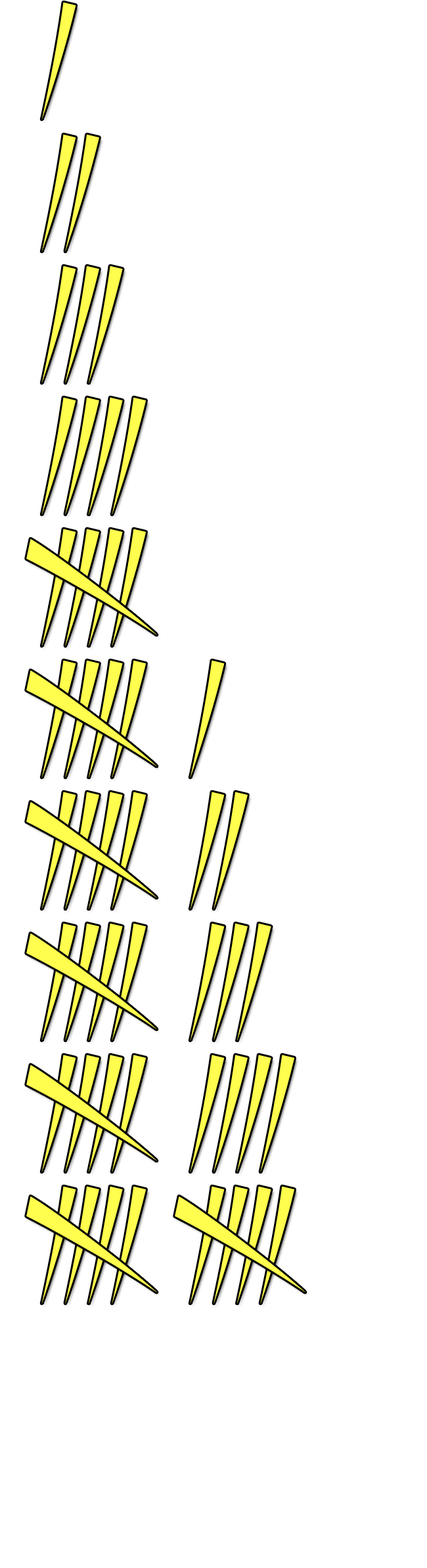
<style>
.page{position:relative;width:427px;height:1568px;background:#ffffff}
.page>*{position:absolute;margin:0}
.t1{font:131.5px "StillTime-Regular";letter-spacing:0.03em;color:#fffd4d}
</style>
<div class="page">
<p class="t1" style="left:41px;top:2px;width:35px;height:118px">I</p>
<p class="t1" style="left:41px;top:134px;width:58px;height:118px">II</p>
<p class="t1" style="left:41px;top:266px;width:82px;height:117px">III</p>
<p class="t1" style="left:41px;top:397px;width:105px;height:118px">IIII</p>
<p class="t1" style="left:41px;top:529px;width:105px;height:117px">IIII</p>
<p class="t1" style="left:41px;top:660px;width:105px;height:118px">IIII</p>
<p class="t1" style="left:190px;top:660px;width:35px;height:118px">I</p>
<p class="t1" style="left:41px;top:792px;width:105px;height:117px">IIII</p>
<p class="t1" style="left:190px;top:792px;width:58px;height:117px">II</p>
<p class="t1" style="left:41px;top:923px;width:105px;height:118px">IIII</p>
<p class="t1" style="left:190px;top:923px;width:82px;height:118px">III</p>
<p class="t1" style="left:41px;top:1055px;width:105px;height:117px">IIII</p>
<p class="t1" style="left:190px;top:1055px;width:105px;height:117px">IIII</p>
<p class="t1" style="left:41px;top:1186px;width:105px;height:118px">IIII</p>
<p class="t1" style="left:190px;top:1186px;width:105px;height:118px">IIII</p>
</div>
